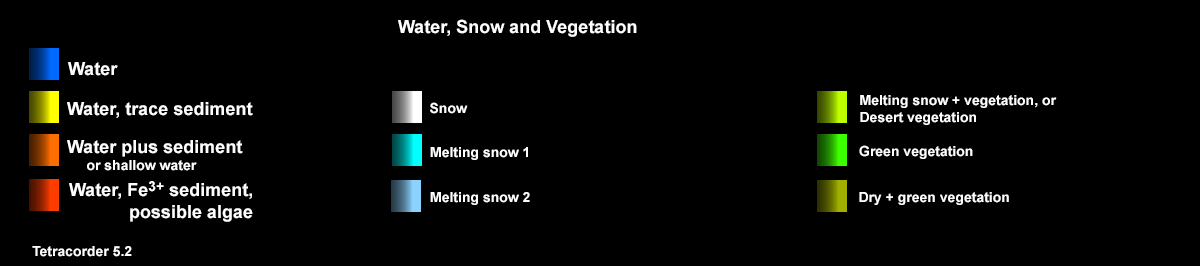
<style>
.page{position:relative;width:1200px;height:266px;background:#000000}
.page>*{position:absolute;margin:0}
.t1{font:18px "Arial-BoldMT";color:#fffefe}
.t2{font:14px "Arial-BoldMT";color:#fffefe}
.t3{font:14px "Arial-BoldMT";color:#ffff00}
</style>
<div class="page">
<p class="t1" style="left:398px;top:19px;width:239px;height:18px">Water, Snow and Vegetation</p>
<p class="t1" style="left:68px;top:62px;width:50px;height:14px">Water</p>
<p class="t1" style="left:67px;top:102px;width:186px;height:16px">Water, trace sediment</p>
<p class="t2" style="left:430px;top:102px;width:38px;height:12px">Snow</p>
<p class="t2" style="left:860px;top:95px;width:197px;height:30px">Melting snow + vegetation, or<br>Desert vegetation</p>
<p class="t1" style="left:67px;top:140px;width:176px;height:31px">Water plus sediment<br>     <span class="t3">or shallow water</span></p>
<p class="t2" style="left:430px;top:147px;width:98px;height:13px">Melting snow 1</p>
<p class="t2" style="left:859px;top:145px;width:114px;height:14px">Green vegetation</p>
<p class="t1" style="left:69px;top:181px;width:184px;height:41px">Water, Fe<span class="t2">3+</span> sediment,<br>            possible algae</p>
<p class="t2" style="left:430px;top:192px;width:100px;height:13px">Melting snow 2</p>
<p class="t2" style="left:859px;top:192px;width:150px;height:13px">Dry + green vegetation</p>
<p class="t2" style="left:32px;top:246px;width:100px;height:11px">Tetracorder 5.2</p>
</div>
